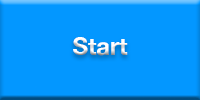
<style>
.page{position:relative;width:200px;height:100px;background:#0397ff}
.page>*{position:absolute;margin:0}
.t1{font:24px "HelveticaNeue-Bold";color:#ffffff}
</style>
<div class="page">
<p class="t1" style="left:73px;top:37px;width:55px;height:19px">Start</p>
</div>
